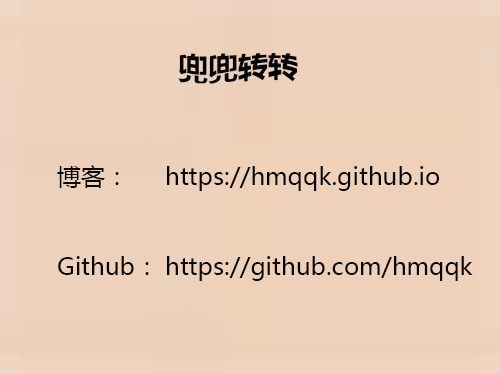
<style>
.page{position:relative;width:500px;height:374px}
.page>*{position:absolute;margin:0}
.t1{font:30px "MicrosoftYaHei-Bold";color:#060505}
.t2{font:24px/30px "MicrosoftYaHei";color:#060505}
</style>
<div class="page">
<p class="t1" style="left:178px;top:53px;width:120px;height:31px">兜兜转转</p>
<p class="t2" style="left:57px;top:165px;width:416px;height:116px">博客： https://hmqqk.github.io<br><br><br>Github： https://github.com/hmqqk</p>
</div>
